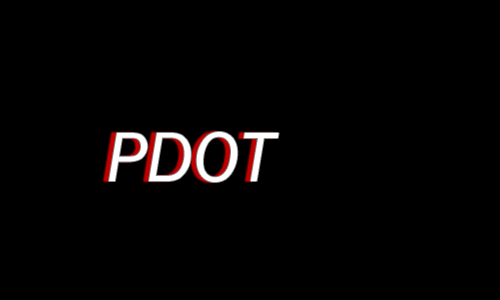
<style>
.page{position:relative;width:500px;height:300px;background:#000000}
.page>*{position:absolute;margin:0}
.t1{font:72px "FranklinGothic-BookItalic";color:#ffffff}
</style>
<div class="page">
<p class="t1" style="left:109px;top:132px;width:170px;height:50px">PDOT</p>
</div>
